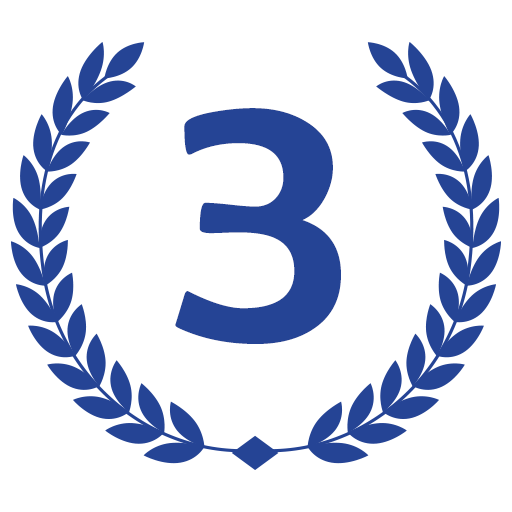
<style>
.page{position:relative;width:512px;height:512px;background:#ffffff}
.page>*{position:absolute;margin:0}
.t1{font:92.5px "BerlinSansFB-Reg";color:#254495}
</style>
<div class="page">
<p class="t1" style="left:175px;top:108px;width:166px;height:236px;text-align:center">3</p>
</div>
